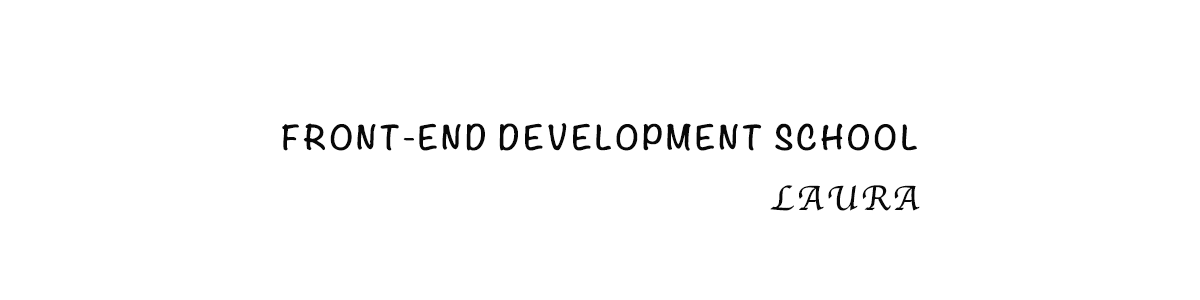
<style>
.page{position:relative;width:1200px;height:300px;background:#ffffff}
.page>*{position:absolute;margin:0}
.t1{font:30px/30px "Noteworthy-Bold";letter-spacing:0.1em;color:#080808;text-transform:uppercase}
.t2{font:36px/30px "Apple-Chancery";letter-spacing:0.1em;color:#080808;text-transform:uppercase}
</style>
<div class="page">
<p class="t1" style="left:282px;top:123px;width:638px;height:88px;text-align:right">front-end development school<br><br><span class="t2">laura</span></p>
</div>
